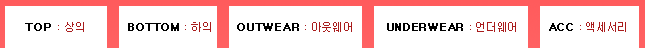
<style>
.page{position:relative;width:645px;height:48px;background:#ffffff}
.page>*{position:absolute;margin:0}
.t1{font:11px "Dotum";color:#a91c1c}
.t2{font:11px "Dotum";color:#000000;font-weight:bold}
.t3{font:11px "Dotum";letter-spacing:-0.025em;color:#000000;font-weight:bold}
.t4{font:11px "Dotum";letter-spacing:-0.025em;color:#a91c1c}
</style>
<div class="page">
<p class="t1" style="left:25px;top:22px;width:59px;height:10px"><span class="t2">TOP </span>: 상의</p>
<p class="t3" style="left:128px;top:22px;width:83px;height:10px">BOTTOM <span class="t4">: 하의</span></p>
<p class="t3" style="left:237px;top:22px;width:115px;height:10px">OUTWEAR <span class="t4">: 아웃웨어</span></p>
<p class="t3" style="left:387px;top:22px;width:129px;height:10px">UNDERWEAR <span class="t4">: 언더웨어</span></p>
<p class="t4" style="left:549px;top:22px;width:77px;height:10px"><span class="t3">ACC </span>: 액세서리</p>
</div>
